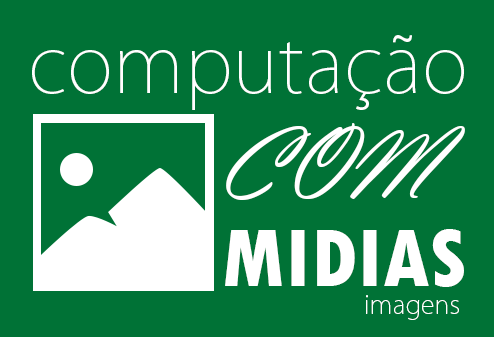
<style>
.page{position:relative;width:494px;height:337px;background:#007236}
.page>*{position:absolute;margin:0}
.t1{font:78.4px "KozGoPro-ExtraLight";color:#ffffff}
.t2{font:105.8px "VladimirScript";color:#ffffff}
.t3{font:86.2px "TwCenMT-CondensedExtraBold";color:#ffffff}
.t4{font:25.9px "KozGoPro-ExtraLight";color:#ffffff}
</style>
<div class="page">
<p class="t1" style="left:32px;top:35px;width:432px;height:75px">computação</p>
<p class="t2" style="left:226px;top:123px;width:239px;height:77px">COM</p>
<p class="t3" style="left:225px;top:229px;width:239px;height:58px">MIDIAS</p>
<p class="t4" style="left:366px;top:295px;width:93px;height:25px">imagens</p>
</div>
